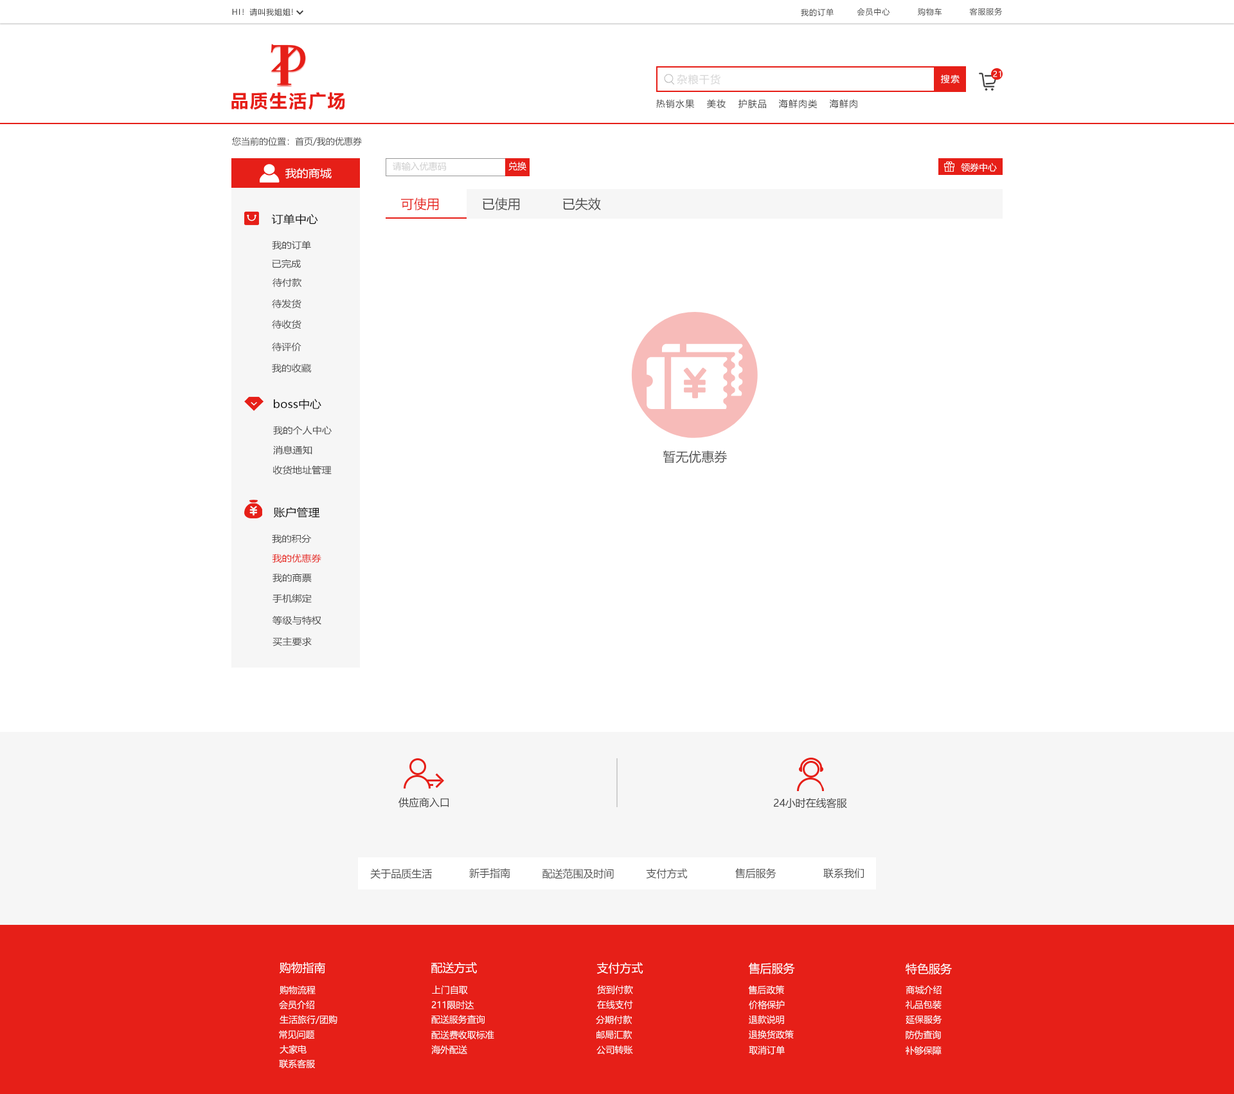
<style>
.page{position:relative;width:1234px;height:1094px;background:#ffffff}
.page>*{position:absolute;margin:0}
.t1{font:7.7px "MicrosoftYaHei";letter-spacing:0.08em;color:#404040}
.t2{font:10.3px "MicrosoftYaHei";letter-spacing:0.08em;color:#d6d6d6}
.t3{font:9px "MicrosoftYaHei";letter-spacing:0.08em;color:#ffffff}
.t4{font:7.7px "MicrosoftYaHei";letter-spacing:0.08em;color:#ffffff}
.t5{font:18px "MicrosoftYaHei-Bold";letter-spacing:0.08em;color:#e61f18}
.t6{font:9px "MicrosoftYaHei";letter-spacing:0.08em;color:#404040}
.t7{font:9px "MicrosoftYaHei";color:#505050}
.t8{font:9px "MicrosoftYaHei";color:#cdcdcd}
.t9{font:9px "MicrosoftYaHei";color:#ffffff}
.t10{font:10.6px "MicrosoftYaHei";color:#ffffff;scale:1.09 1}
.t11{font:12.9px "MicrosoftYaHei";color:#e61f18}
.t12{font:12.9px "MicrosoftYaHei";color:#505050}
.t13{font:10.6px "MicrosoftYaHei";color:#101010;scale:1.09 1}
.t14{font:9px "MicrosoftYaHei";color:#484848;scale:1.09 1}
.t15{font:9px "MicrosoftYaHei";color:#e61f18;scale:1.09 1}
.t16{font:10.3px "MicrosoftYaHei";color:#404040}
.t17{font:10.3px "MicrosoftYaHei";color:#505050}
.t18{font:11.6px "MicrosoftYaHei";color:#ffffff}
</style>
<div class="page">
<p class="t1" style="left:232px;top:8px;width:61px;height:8px">HI！请叫我姐姐!</p>
<p class="t1" style="left:801px;top:8px;width:33px;height:8px">我的订单</p>
<p class="t1" style="left:857px;top:8px;width:33px;height:8px">会员中心</p>
<p class="t1" style="left:918px;top:8px;width:24px;height:8px">购物车</p>
<p class="t1" style="left:969px;top:8px;width:34px;height:7px">客服服务</p>
<p class="t2" style="left:677px;top:74px;width:44px;height:11px">杂粮干货</p>
<p class="t3" style="left:941px;top:75px;width:19px;height:9px">搜索</p>
<p class="t4" style="left:993px;top:71px;width:9px;height:6px">21</p>
<p class="t5" style="left:231px;top:92px;width:114px;height:18px">品质生活广场</p>
<p class="t6" style="left:656px;top:99px;width:39px;height:10px">热销水果</p>
<p class="t6" style="left:707px;top:99px;width:19px;height:9px">美妆</p>
<p class="t6" style="left:739px;top:99px;width:27px;height:10px">护肤品</p>
<p class="t6" style="left:779px;top:99px;width:39px;height:10px">海鲜肉类</p>
<p class="t6" style="left:829px;top:99px;width:29px;height:10px">海鲜肉</p>
<p class="t7" style="left:232px;top:137px;width:130px;height:9px">您当前的位置：首页/我的优惠券</p>
<p class="t8" style="left:393px;top:161px;width:53px;height:10px">请输入优惠码</p>
<p class="t9" style="left:509px;top:161px;width:17px;height:9px">兑换</p>
<p class="t10" style="left:285px;top:168px;width:47px;height:11px">我的商城</p>
<p class="t9" style="left:961px;top:163px;width:36px;height:9px">领券中心</p>
<p class="t11" style="left:401px;top:197px;width:38px;height:13px">可使用</p>
<p class="t12" style="left:483px;top:197px;width:37px;height:13px">已使用</p>
<p class="t12" style="left:563px;top:197px;width:38px;height:13px">已失效</p>
<p class="t13" style="left:271px;top:213px;width:47px;height:11px">订单中心</p>
<p class="t14" style="left:272px;top:240px;width:39px;height:9px">我的订单</p>
<p class="t14" style="left:272px;top:259px;width:29px;height:9px">已完成</p>
<p class="t14" style="left:273px;top:278px;width:29px;height:9px">待付款</p>
<p class="t14" style="left:272px;top:299px;width:30px;height:10px">待发货</p>
<p class="t14" style="left:272px;top:320px;width:30px;height:9px">待收货</p>
<p class="t14" style="left:272px;top:342px;width:30px;height:10px">待评价</p>
<p class="t14" style="left:272px;top:363px;width:39px;height:10px">我的收藏</p>
<p class="t13" style="left:274px;top:399px;width:47px;height:11px">boss中心</p>
<p class="t14" style="left:273px;top:426px;width:59px;height:9px">我的个人中心</p>
<p class="t14" style="left:273px;top:446px;width:39px;height:9px">消息通知</p>
<p class="t12" style="left:663px;top:450px;width:64px;height:13px">暂无优惠券</p>
<p class="t14" style="left:273px;top:465px;width:59px;height:9px">收货地址管理</p>
<p class="t13" style="left:273px;top:507px;width:47px;height:11px">账户管理</p>
<p class="t14" style="left:272px;top:534px;width:40px;height:9px">我的积分</p>
<p class="t15" style="left:272px;top:554px;width:49px;height:8px">我的优惠券</p>
<p class="t14" style="left:273px;top:573px;width:39px;height:9px">我的商票</p>
<p class="t14" style="left:273px;top:593px;width:39px;height:10px">手机绑定</p>
<p class="t14" style="left:273px;top:615px;width:48px;height:10px">等级与特权</p>
<p class="t14" style="left:273px;top:636px;width:39px;height:10px">买主要求</p>
<p class="t16" style="left:399px;top:797px;width:50px;height:10px">供应商入口</p>
<p class="t16" style="left:774px;top:797px;width:73px;height:11px">24小时在线客服</p>
<p class="t17" style="left:370px;top:868px;width:62px;height:11px">关于品质生活</p>
<p class="t17" style="left:469px;top:867px;width:41px;height:11px">新手指南</p>
<p class="t17" style="left:543px;top:868px;width:71px;height:11px">配送范围及时间</p>
<p class="t17" style="left:646px;top:868px;width:42px;height:10px">支付方式</p>
<p class="t17" style="left:735px;top:868px;width:42px;height:10px">售后服务</p>
<p class="t17" style="left:824px;top:868px;width:40px;height:10px">联系我们</p>
<p class="t18" style="left:280px;top:962px;width:45px;height:11px">购物指南</p>
<p class="t18" style="left:431px;top:962px;width:46px;height:11px">配送方式</p>
<p class="t18" style="left:597px;top:962px;width:47px;height:11px">支付方式</p>
<p class="t18" style="left:748px;top:962px;width:47px;height:12px">售后服务</p>
<p class="t18" style="left:906px;top:962px;width:46px;height:13px">特色服务</p>
<p class="t9" style="left:280px;top:985px;width:36px;height:9px">购物流程</p>
<p class="t9" style="left:432px;top:985px;width:36px;height:9px">上门自取</p>
<p class="t9" style="left:597px;top:985px;width:36px;height:9px">货到付款</p>
<p class="t9" style="left:748px;top:985px;width:36px;height:9px">售后政策</p>
<p class="t9" style="left:906px;top:985px;width:36px;height:9px">商城介绍</p>
<p class="t9" style="left:279px;top:1000px;width:35px;height:9px">会员介绍</p>
<p class="t9" style="left:431px;top:1000px;width:43px;height:9px">211限时达</p>
<p class="t9" style="left:597px;top:1000px;width:36px;height:9px">在线支付</p>
<p class="t9" style="left:749px;top:1000px;width:36px;height:9px">价格保护</p>
<p class="t9" style="left:906px;top:1000px;width:36px;height:9px">礼品包装</p>
<p class="t9" style="left:280px;top:1014px;width:58px;height:9px">生活旅行/团购</p>
<p class="t9" style="left:431px;top:1014px;width:54px;height:9px">配送服务查询</p>
<p class="t9" style="left:596px;top:1014px;width:36px;height:10px">分期付款</p>
<p class="t9" style="left:749px;top:1014px;width:35px;height:10px">退款说明</p>
<p class="t9" style="left:906px;top:1014px;width:36px;height:9px">延保服务</p>
<p class="t9" style="left:279px;top:1030px;width:36px;height:9px">常见问题</p>
<p class="t9" style="left:431px;top:1030px;width:63px;height:9px">配送费收取标准</p>
<p class="t9" style="left:597px;top:1030px;width:35px;height:9px">邮局汇款</p>
<p class="t9" style="left:749px;top:1029px;width:45px;height:10px">退换货政策</p>
<p class="t9" style="left:906px;top:1030px;width:35px;height:9px">防伪查询</p>
<p class="t9" style="left:280px;top:1044px;width:27px;height:10px">大家电</p>
<p class="t9" style="left:431px;top:1045px;width:36px;height:9px">海外配送</p>
<p class="t9" style="left:597px;top:1045px;width:36px;height:9px">公司转账</p>
<p class="t9" style="left:749px;top:1045px;width:36px;height:9px">取消订单</p>
<p class="t9" style="left:906px;top:1045px;width:36px;height:10px">补够保障</p>
<p class="t9" style="left:279px;top:1059px;width:36px;height:9px">联系客服</p>
</div>
